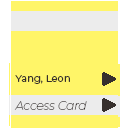
<style>
.page{position:relative;width:128px;height:128px;background:#fff568}
.page>*{position:absolute;margin:0}
.t1{font:10px "Montserrat-Regular";color:#362f2d}
.t2{font:12px "Montserrat-ThinItalic";color:#362f2d}
</style>
<div class="page">
<p class="t1" style="left:15px;top:75px;width:55px;height:9px">Yang, Leon</p>
<p class="t2" style="left:14px;top:101px;width:73px;height:9px">Access Card</p>
</div>
